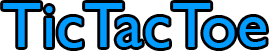
<style>
.page{position:relative;width:269px;height:51px;background:#ffffff}
.page>*{position:absolute;margin:0}
.t1{font:65px "GillSans";color:#009cff}
</style>
<div class="page">
<p class="t1" style="left:3px;top:3px;width:263px;height:45px">TicTacToe</p>
</div>
